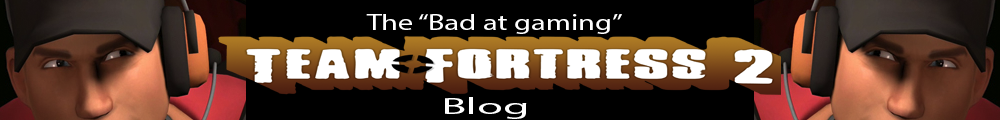
<style>
.page{position:relative;width:1000px;height:120px;background:#000000}
.page>*{position:absolute;margin:0}
.t1{font:22.5px "MyriadPro-Regular";color:#ffffff;scale:1.35 1}
.t2{font:23px "MyriadPro-Regular";color:#ffffff;scale:2.03 1}
</style>
<div class="page">
<p class="t1" style="left:366px;top:14px;width:256px;height:20px">The “Bad at gaming”</p>
<p class="t2" style="left:445px;top:97px;width:82px;height:22px">Blog</p>
</div>
